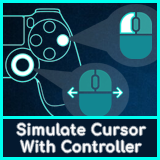
<style>
.page{position:relative;width:160px;height:160px}
.page>*{position:absolute;margin:0}
.t1{font:14.7px "Comfortaa-Bold";letter-spacing:0.05em;color:#ffffff;scale:0.95 1}
</style>
<div class="page">
<p class="t1" style="left:17px;top:123px;width:129px;height:30px;text-align:center">Simulate Cursor<br>With Controller</p>
</div>
